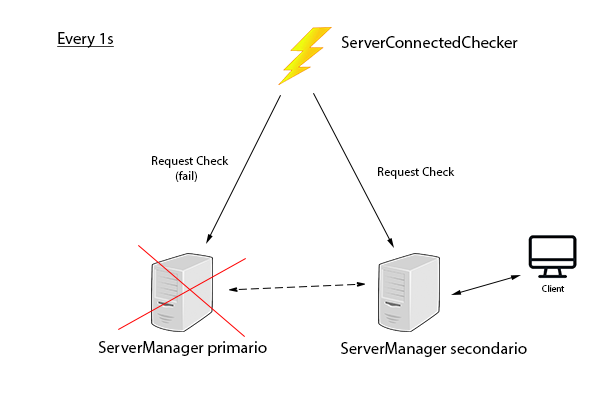
<style>
.page{position:relative;width:600px;height:400px;background:#ffffff}
.page>*{position:absolute;margin:0}
.t1{font:16.7px "MyriadPro-Regular";color:#000000;text-decoration:underline}
.t2{font:16.7px "MyriadPro-Regular";color:#000000}
.t3{font:12.5px "MyriadPro-Regular";color:#000000}
.t4{font:9.1px "MyriadPro-Regular";color:#000000}
</style>
<div class="page">
<p class="t1" style="left:57px;top:32px;width:57px;height:16px">Every 1s</p>
<p class="t2" style="left:341px;top:36px;width:177px;height:12px">ServerConnectedChecker</p>
<p class="t3" style="left:152px;top:156px;width:77px;height:26px">Request Check<br>         (fail)</p>
<p class="t3" style="left:378px;top:167px;width:77px;height:12px">Request Check</p>
<p class="t4" style="left:542px;top:285px;width:23px;height:7px">Client</p>
<p class="t2" style="left:98px;top:341px;width:169px;height:15px">ServerManager primario</p>
<p class="t2" style="left:341px;top:342px;width:186px;height:15px">ServerManager secondario</p>
</div>
